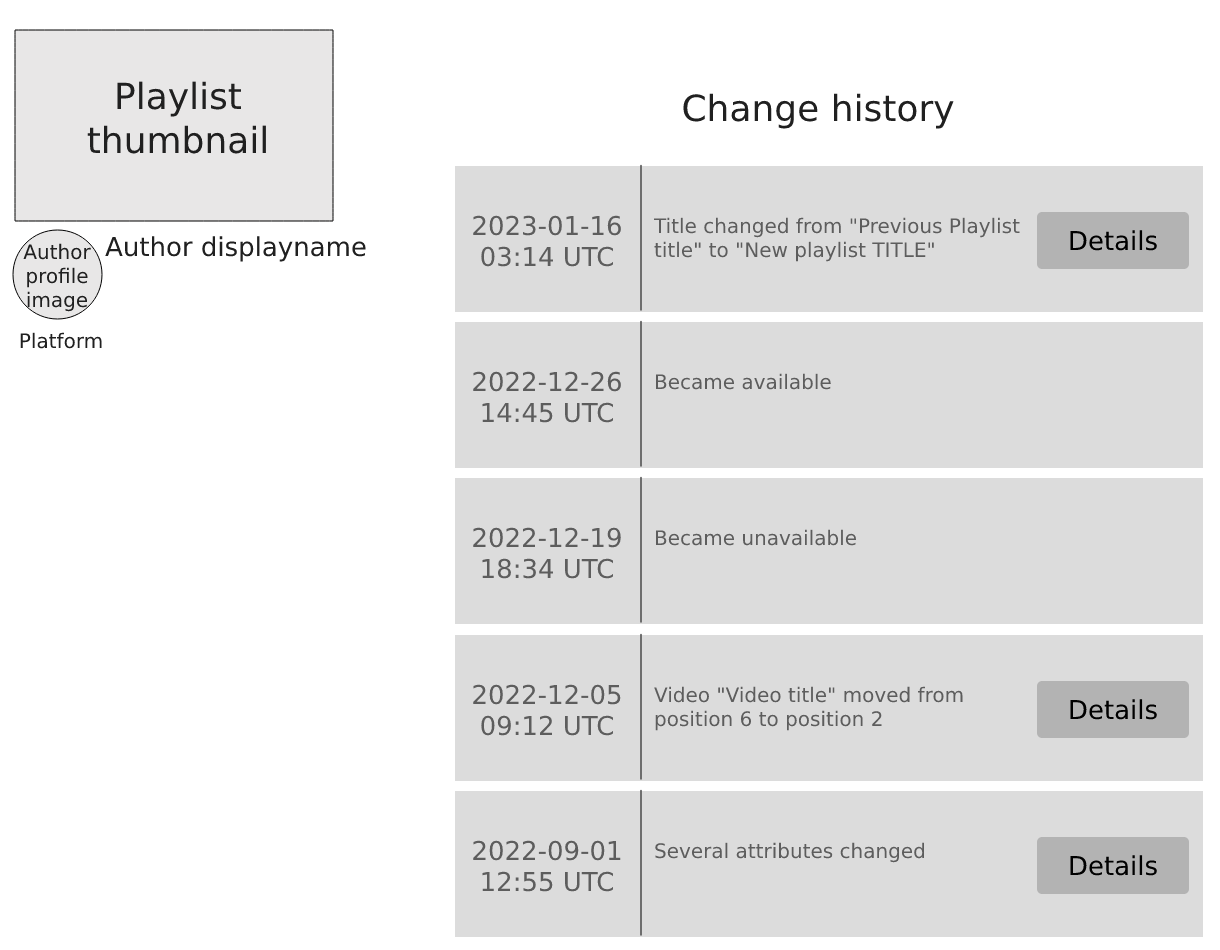
<style>
.page{position:relative;width:1220px;height:950px;background:#ffffff}
.page>*{position:absolute;margin:0}
.t1{font:36px "DejaVuSans";color:#202020}
.t2{font:26px "DejaVuSans";color:#5d5d5d}
.t3{font:20px "DejaVuSans";color:#5d5d5d}
.t4{font:26px "DejaVuSans";color:#000000}
.t5{font:20px "DejaVuSans";color:#202020}
.t6{font:26px "DejaVuSans";color:#202020}
</style>
<div class="page">
<p class="t1" style="left:87px;top:81px;width:179px;height:73px;text-align:center">Playlist<br>thumbnail</p>
<p class="t1" style="left:683px;top:93px;width:271px;height:36px">Change history</p>
<p class="t2" style="left:473px;top:215px;width:148px;height:52px;text-align:center">2023-01-16<br>03:14 UTC</p>
<p class="t3" style="left:653px;top:217px;width:367px;height:45px">Title changed from "Previous Playlist<br>title" to "New playlist TITLE"</p>
<p class="t4" style="left:1070px;top:230px;width:87px;height:21px">Details</p>
<p class="t5" style="left:23px;top:243px;width:68px;height:69px;text-align:center">Author<br>profile<br>image</p>
<p class="t6" style="left:105px;top:236px;width:261px;height:26px">Author displayname</p>
<p class="t5" style="left:20px;top:332px;width:82px;height:17px">Platform</p>
<p class="t2" style="left:473px;top:371px;width:148px;height:52px;text-align:center">2022-12-26<br>14:45 UTC</p>
<p class="t3" style="left:655px;top:373px;width:176px;height:17px">Became available</p>
<p class="t2" style="left:473px;top:527px;width:148px;height:52px;text-align:center">2022-12-19<br>18:34 UTC</p>
<p class="t3" style="left:655px;top:529px;width:201px;height:17px">Became unavailable</p>
<p class="t2" style="left:473px;top:684px;width:148px;height:52px;text-align:center">2022-12-05<br>09:12 UTC</p>
<p class="t3" style="left:654px;top:686px;width:309px;height:45px">Video "Video title" moved from<br>position 6 to position 2</p>
<p class="t4" style="left:1070px;top:699px;width:87px;height:21px">Details</p>
<p class="t2" style="left:473px;top:840px;width:148px;height:52px;text-align:center">2022-09-01<br>12:55 UTC</p>
<p class="t3" style="left:655px;top:842px;width:270px;height:21px">Several attributes changed</p>
<p class="t4" style="left:1070px;top:855px;width:87px;height:21px">Details</p>
</div>
